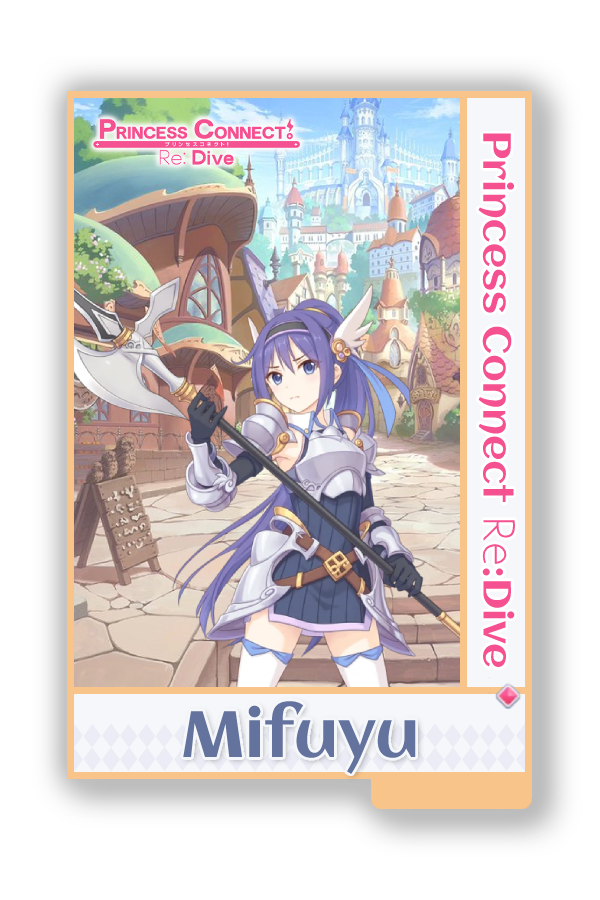
<style>
.page{position:relative;width:600px;height:900px;background:#ffffff}
.page>*{position:absolute;margin:0}
.t1{font:39px "Aclonica-Regular";color:#f55191}
.t2{font:39px "AaarghNormal";color:#f55191}
.t3{font:65px "Aclonica-Regular";color:#64739d}
</style>
<div class="page">
<p class="t1" style="left:478px;top:133px;width:38px;height:534px;rotate:90deg">Princess Connect <span class="t2">Re</span>:Dive</p>
<p class="t3" style="left:183px;top:701px;width:233px;height:73px">Mifuyu</p>
</div>
